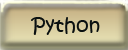
<style>
.page{position:relative;width:128px;height:50px}
.page>*{position:absolute;margin:0}
.t1{font:20px "KristenITC-Regular";color:#0a1010}
</style>
<div class="page">
<p class="t1" style="left:31px;top:17px;width:69px;height:18px">Python</p>
</div>
